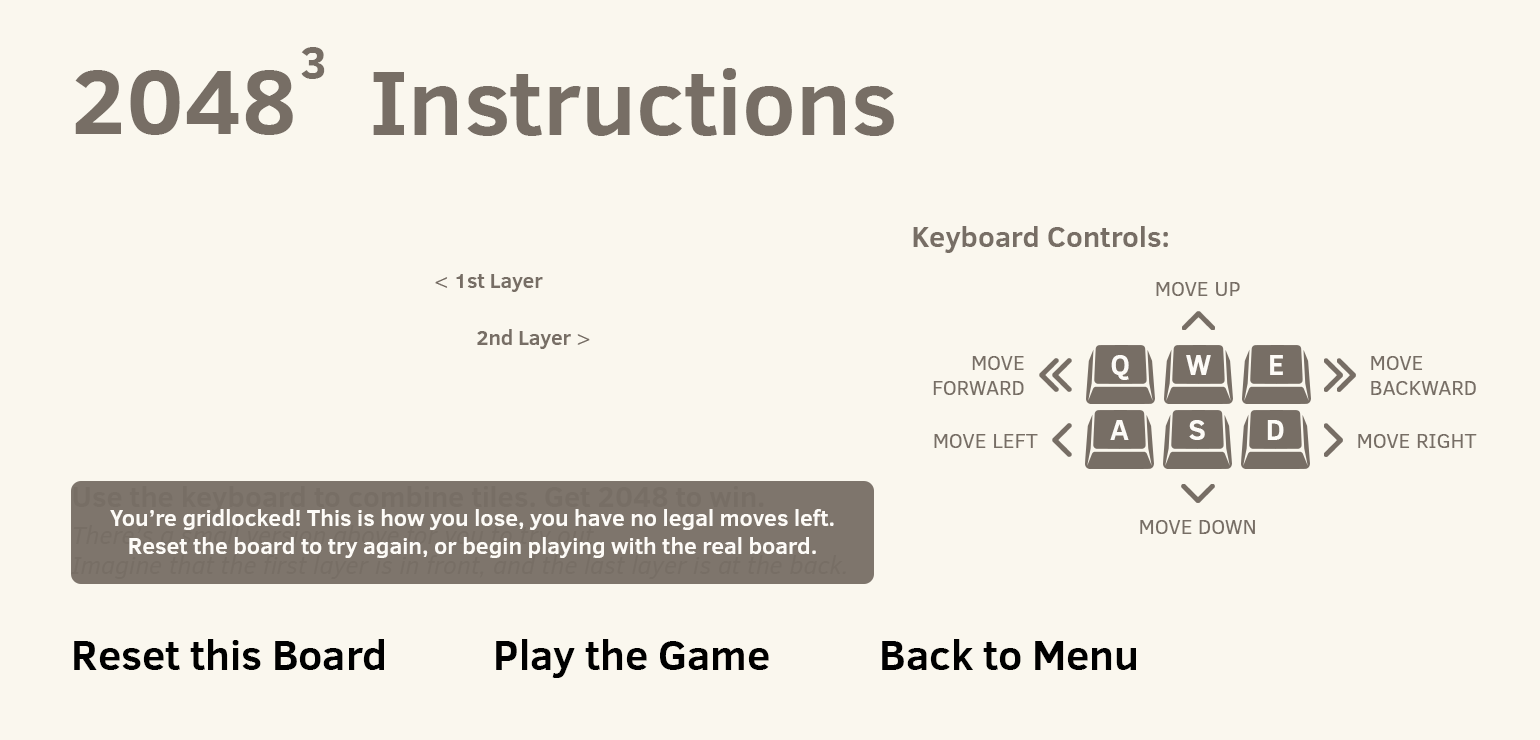
<style>
.page{position:relative;width:1540px;height:740px;background:#faf7ee}
.page>*{position:absolute;margin:0}
.t1{font:47.5px "ClearSans-Bold";color:#776e65}
.t2{font:92.8px "ClearSans-Bold";color:#776e65}
.t3{font:29.2px "ClearSans-Bold";color:#776e65}
.t4{font:20.8px "ClearSans-Bold";color:#776e65}
.t5{font:20.8px "ClearSans";color:#776e65}
.t6{font:29.2px "ClearSans-Bold";color:#fdfbf7}
.t7{font:22.9px "ClearSans-Bold";color:#fdfbf7}
.t8{font:41.7px "ClearSans-Bold";color:#000000}
</style>
<div class="page">
<p class="t1" style="left:301px;top:47px;width:24px;height:32px">3</p>
<p class="t2" style="left:75px;top:70px;width:218px;height:65px">2048</p>
<p class="t2" style="left:373px;top:68px;width:521px;height:68px">Instructions</p>
<p class="t3" style="left:913px;top:226px;width:255px;height:27px">Keyboard Controls:</p>
<p class="t4" style="left:435px;top:274px;width:108px;height:18px"><span class="t5">&lt; </span>1st Layer</p>
<p class="t5" style="left:1156px;top:282px;width:84px;height:14px">MOVE UP</p>
<p class="t4" style="left:477px;top:329px;width:113px;height:20px">2nd Layer <span class="t5">&gt;</span></p>
<p class="t5" style="left:933px;top:356px;width:91px;height:39px;text-align:right">MOVE<br>FORWARD</p>
<p class="t6" style="left:1111px;top:355px;width:18px;height:25px">Q</p>
<p class="t6" style="left:1186px;top:355px;width:25px;height:20px">W</p>
<p class="t6" style="left:1270px;top:355px;width:13px;height:20px">E</p>
<p class="t5" style="left:1371px;top:356px;width:105px;height:39px">MOVE<br>BACKWARD</p>
<p class="t6" style="left:1110px;top:420px;width:19px;height:20px">A</p>
<p class="t6" style="left:1189px;top:420px;width:16px;height:20px">S</p>
<p class="t6" style="left:1267px;top:420px;width:17px;height:20px">D</p>
<p class="t5" style="left:934px;top:434px;width:104px;height:14px">MOVE LEFT</p>
<p class="t5" style="left:1358px;top:434px;width:119px;height:14px">MOVE RIGHT</p>
<p class="t7" style="left:110px;top:509px;width:724px;height:49px;text-align:center">You’re gridlocked! This is how you lose, you have no legal moves left. <br>Reset the board to try again, or begin playing with the real board.</p>
<p class="t5" style="left:1140px;top:520px;width:115px;height:14px">MOVE DOWN</p>
<p class="t8" style="left:74px;top:639px;width:310px;height:31px">Reset this Board</p>
<p class="t8" style="left:496px;top:639px;width:273px;height:39px">Play the Game</p>
<p class="t8" style="left:882px;top:639px;width:254px;height:31px">Back to Menu</p>
</div>
